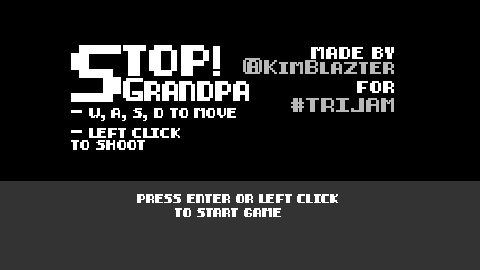
<style>
.page{position:relative;width:480px;height:270px;background:#000000}
.page>*{position:absolute;margin:0}
.t1{font:47.7px "8-bit-pusab";letter-spacing:-0.08em;color:#ffffff;font-weight:bold}
.t2{font:29.6px "8-bit-pusab";letter-spacing:-0.08em;color:#ffffff;font-weight:bold;scale:1.11 1}
.t3{font:22.1px "8-bit-pusab";letter-spacing:-0.08em;color:#ffffff;font-weight:bold;scale:0.84 1}
.t4{font:12px/15px "8-bit-pusab";color:#b8b8b8;font-weight:bold}
.t5{font:12px "8-bit-pusab";color:#ffffff;font-weight:bold}
.t6{font:18.6px "8-bit-pusab";letter-spacing:-0.08em;color:#ffffff;font-weight:bold}
.t7{font:12px/19.2px "8-bit-pusab";color:#b8b8b8;font-weight:bold}
.t8{font:12px/19.2px "8-bit-pusab";color:#ffffff;font-weight:bold}
.t9{font:10.1px "8-bit-pusab";color:#ffffff;font-weight:bold}
.t10{font:8.7px/13.7px "8-bit-pusab";color:#ffffff;font-weight:bold}
</style>
<div class="page">
<p class="t1" style="left:71px;top:45px;width:50px;height:57px">S</p>
<p class="t2" style="left:123px;top:45px;width:86px;height:31px">top</p>
<p class="t3" style="left:213px;top:46px;width:7px;height:30px">!</p>
<p class="t4" style="left:243px;top:47px;width:151px;height:27px;text-align:right"><span class="t5">made by<br></span>@KimBlazter</p>
<p class="t6" style="left:123px;top:78px;width:126px;height:23px">Grandpa</p>
<p class="t7" style="left:291px;top:81px;width:103px;height:31px;text-align:right"><span class="t8">for<br></span>#TRIJAM</p>
<p class="t9" style="left:71px;top:108px;width:165px;height:13px">- w, a, s, d to move</p>
<p class="t9" style="left:71px;top:128px;width:109px;height:22px">- left click<br>to shoot</p>
<p class="t10" style="left:137px;top:194px;width:201px;height:23px;text-align:center">press enter or left click<br>to start game</p>
</div>
